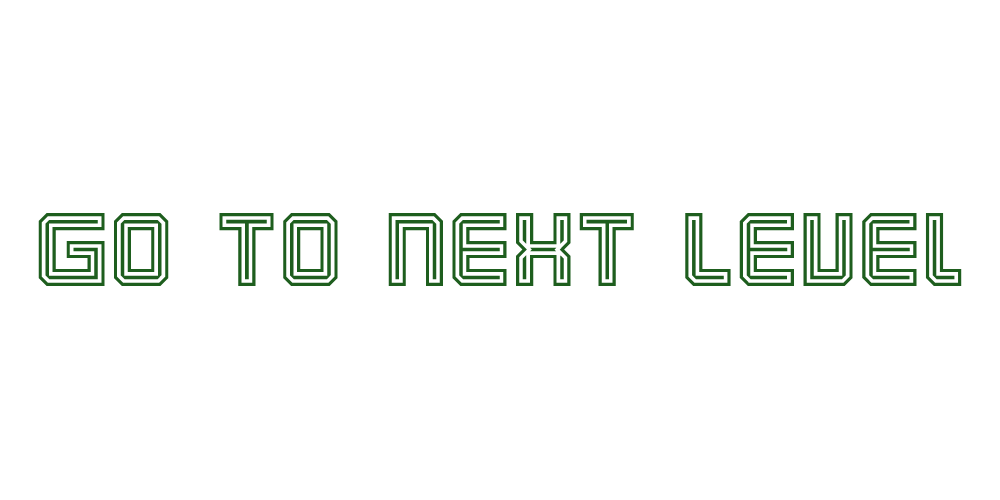
<style>
.page{position:relative;width:1000px;height:500px;background:#ffffff}
.page>*{position:absolute;margin:0}
.t1{font:93px "KarnivoreTecca";color:#1e5e1e}
</style>
<div class="page">
<p class="t1" style="left:38px;top:212px;width:924px;height:75px">Go to next Level</p>
</div>
